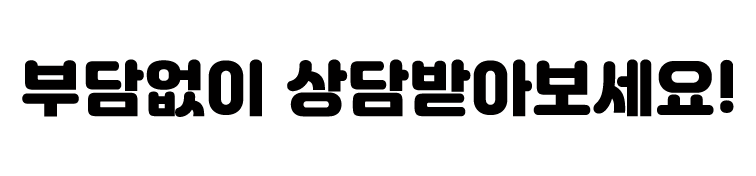
<style>
.page{position:relative;width:756px;height:176px;background:#ffffff}
.page>*{position:absolute;margin:0}
.t1{font:60px "Jalnan";color:#010000;font-weight:bold}
</style>
<div class="page">
<p class="t1" style="left:22px;top:59px;width:712px;height:58px">부담없이 상담받아보세요!</p>
</div>
